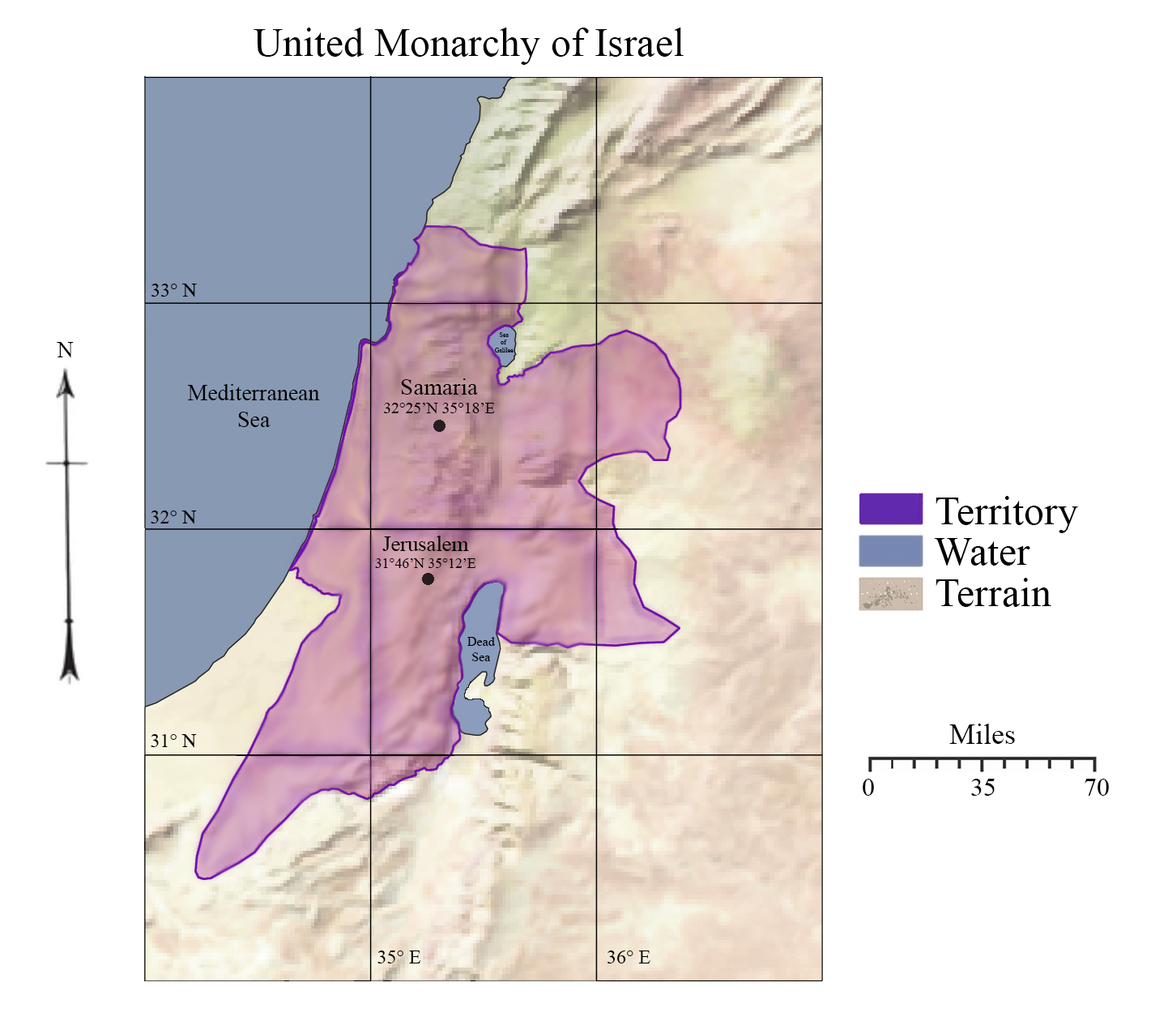
<style>
.page{position:relative;width:1168px;height:1021px;background:#ffffff}
.page>*{position:absolute;margin:0}
.t1{font:40.5px "TimesNewRomanPSMT";color:#000000}
.t2{font:40.5px "TimesNewRomanPSMT";color:#ffffff}
.t3{font:19.4px "TimesNewRomanPSMT";color:#000000}
.t4{font:22.7px "TimesNewRomanPSMT";color:#000000}
.t5{font:6.5px "TimesNewRomanPSMT";color:#000000}
.t6{font:15.8px "TimesNewRomanPSMT";color:#000000}
.t7{font:23.7px "TimesNewRomanPSMT";color:#000000}
.t8{font:14.3px "TimesNewRomanPSMT";color:#000000}
.t9{font:21.5px "TimesNewRomanPSMT";color:#000000}
.t10{font:13px "TimesNewRomanPSMT";color:#000000}
.t11{font:29.2px "TimesNewRomanPSMT";color:#000000}
.t12{font:25.9px "TimesNewRomanPSMT";color:#000000}
</style>
<div class="page">
<p class="t1" style="left:254px;top:28px;width:573px;height:37px">United Monarchy of Israel<span class="t2">m Ipsum</span></p>
<p class="t3" style="left:151px;top:284px;width:46px;height:13px">33° N</p>
<p class="t4" style="left:57px;top:342px;width:17px;height:16px">N</p>
<p class="t5" style="left:495px;top:332px;width:19px;height:20px;text-align:center">Sea<br>of <br>Galilee</p>
<p class="t4" style="left:188px;top:384px;width:132px;height:43px;text-align:center">Mediterranean<br>Sea</p>
<p class="t6" style="left:384px;top:378px;width:111px;height:35px;text-align:center"><span class="t7">Samaria<br></span>32°25’N 35°18’E</p>
<p class="t1" style="left:936px;top:496px;width:142px;height:37px">Territory</p>
<p class="t3" style="left:151px;top:510px;width:46px;height:14px">32° N</p>
<p class="t8" style="left:375px;top:535px;width:101px;height:33px;text-align:center"><span class="t9">Jerusalem<br></span>31°46’N 35°12’E</p>
<p class="t1" style="left:934px;top:538px;width:96px;height:27px">Water</p>
<p class="t1" style="left:936px;top:578px;width:116px;height:29px">Terrain</p>
<p class="t10" style="left:467px;top:637px;width:28px;height:24px;text-align:center">Dead<br>Sea</p>
<p class="t11" style="left:949px;top:723px;width:66px;height:21px">Miles</p>
<p class="t3" style="left:151px;top:734px;width:46px;height:14px">31° N</p>
<p class="t12" style="left:863px;top:779px;width:11px;height:17px">0</p>
<p class="t12" style="left:971px;top:779px;width:24px;height:17px">35</p>
<p class="t12" style="left:1085px;top:779px;width:24px;height:17px">70</p>
<p class="t3" style="left:378px;top:950px;width:43px;height:13px">35° E</p>
<p class="t3" style="left:608px;top:950px;width:43px;height:13px">36° E</p>
</div>
